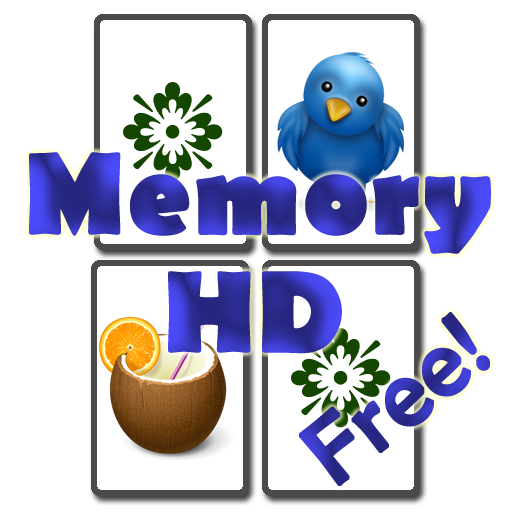
<style>
.page{position:relative;width:512px;height:512px;background:#ffffff}
.page>*{position:absolute;margin:0}
.t1{font:117.5px "BerlinSansFB-Bold";font-weight:bold}
.t2{font:94px "BerlinSansFB-Reg";font-weight:bold}
</style>
<div class="page">
<p class="t1" style="left:29px;top:152px;width:462px;height:102px">Memory</p>
<p class="t1" style="left:168px;top:271px;width:174px;height:83px">HD</p>
<p class="t2" style="left:299px;top:312px;width:191px;height:174px;rotate:-39deg">Free!</p>
</div>
